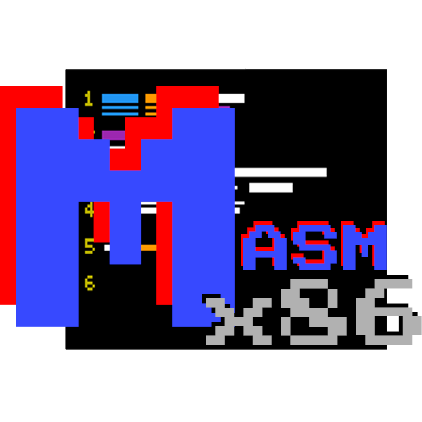
<style>
.page{position:relative;width:422px;height:422px;background:#ffffff}
.page>*{position:absolute;margin:0}
.t1{font:250px "PressStart2P-Regular"}
.t2{font:250px "PressStart2P-Regular";color:#3749ff}
.t3{font:50px "PressStart2P-Regular"}
.t4{font:50px "PressStart2P-Regular";color:#3749ff}
.t5{font:75px "PressStart2P-Regular";color:#b1b1b1}
</style>
<div class="page">
<p class="t1" style="left:0px;top:86px;width:219px;height:219px">M</p>
<p class="t2" style="left:16px;top:108px;width:219px;height:219px">M</p>
<p class="t3" style="left:241px;top:221px;width:144px;height:45px">ASM</p>
<p class="t4" style="left:243px;top:225px;width:144px;height:45px">ASM</p>
<p class="t5" style="left:206px;top:279px;width:216px;height:66px">x86</p>
</div>
